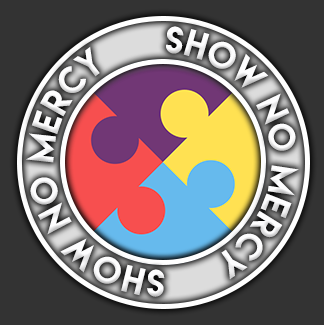
<style>
.page{position:relative;width:324px;height:325px;background:#333333}
.page>*{position:absolute;margin:0}
.t1{font:34px/11.5px "LemonMilk";color:#fdfdfe}
</style>
<div class="page">
<p class="t1" style="left:26px;top:26px;width:273px;height:271px;text-align:center">SHOW NO MERCY      SHOW NO MERCY</p>
</div>
